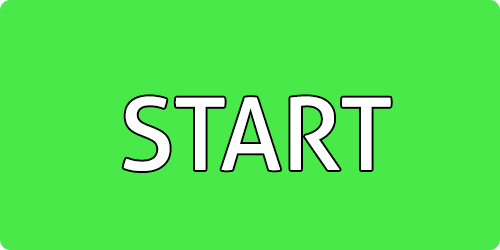
<style>
.page{position:relative;width:500px;height:250px;background:#48e948}
.page>*{position:absolute;margin:0}
.t1{font:100px "Aller";color:#ffffff}
</style>
<div class="page">
<p class="t1" style="left:123px;top:96px;width:268px;height:75px">START</p>
</div>
